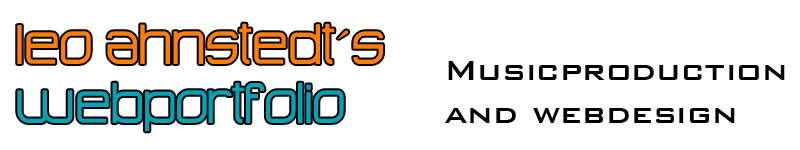
<style>
.page{position:relative;width:800px;height:150px;background:#ffffff}
.page>*{position:absolute;margin:0}
.t1{font:48px "AdvancedArchitecture";color:#ff7e07}
.t2{font:36px "BankGothicBT-Medium";color:#000000}
.t3{font:48px "AdvancedArchitecture";color:#08a1b3}
</style>
<div class="page">
<p class="t1" style="left:17px;top:23px;width:366px;height:41px">Leo Ahnstedt´s</p>
<p class="t2" style="left:445px;top:61px;width:340px;height:62px">Musicproduction and webdesign</p>
<p class="t3" style="left:17px;top:82px;width:327px;height:50px">Webportfolio</p>
</div>
